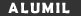
<style>
.page{position:relative;width:81px;height:16px;background:#333333}
.page>*{position:absolute;margin:0}
.t1{font:15px "BerlinSansFBDemi-Bold";letter-spacing:0.1em;color:#ffffff}
</style>
<div class="page">
<p class="t1" style="left:8px;top:2px;width:62px;height:12px">ALUMIL</p>
</div>
